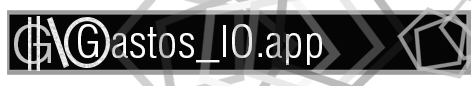
<style>
.page{position:relative;width:471px;height:86px;background:#050505}
.page>*{position:absolute;margin:0}
.t1{font:52.6px "HelveticaLTStd-Light";letter-spacing:0.1em;color:#c1c1c1;scale:1.09 1}
.t2{font:42.5px "HelveticaLTStd-LightCond";color:#fffafa;scale:1.09 1}
.t3{font:42.5px "HelveticaLTStd-LightCond";letter-spacing:0.2em;color:#fffafa;scale:1.09 1}
</style>
<div class="page">
<p class="t1" style="left:14px;top:24px;width:37px;height:40px">G</p>
<p class="t2" style="left:78px;top:24px;width:244px;height:41px"><span class="t3">G</span>astos_IO.app</p>
</div>
